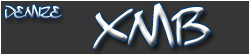
<style>
.page{position:relative;width:250px;height:55px;background:#373636}
.page>*{position:absolute;margin:0}
.t1{font:18px "DopeJam";text-transform:uppercase}
.t2{font:60px "DopeJam";text-transform:uppercase}
</style>
<div class="page">
<p class="t1" style="left:5px;top:4px;width:57px;height:15px">demize</p>
<p class="t2" style="left:93px;top:3px;width:118px;height:46px">XMB</p>
</div>
